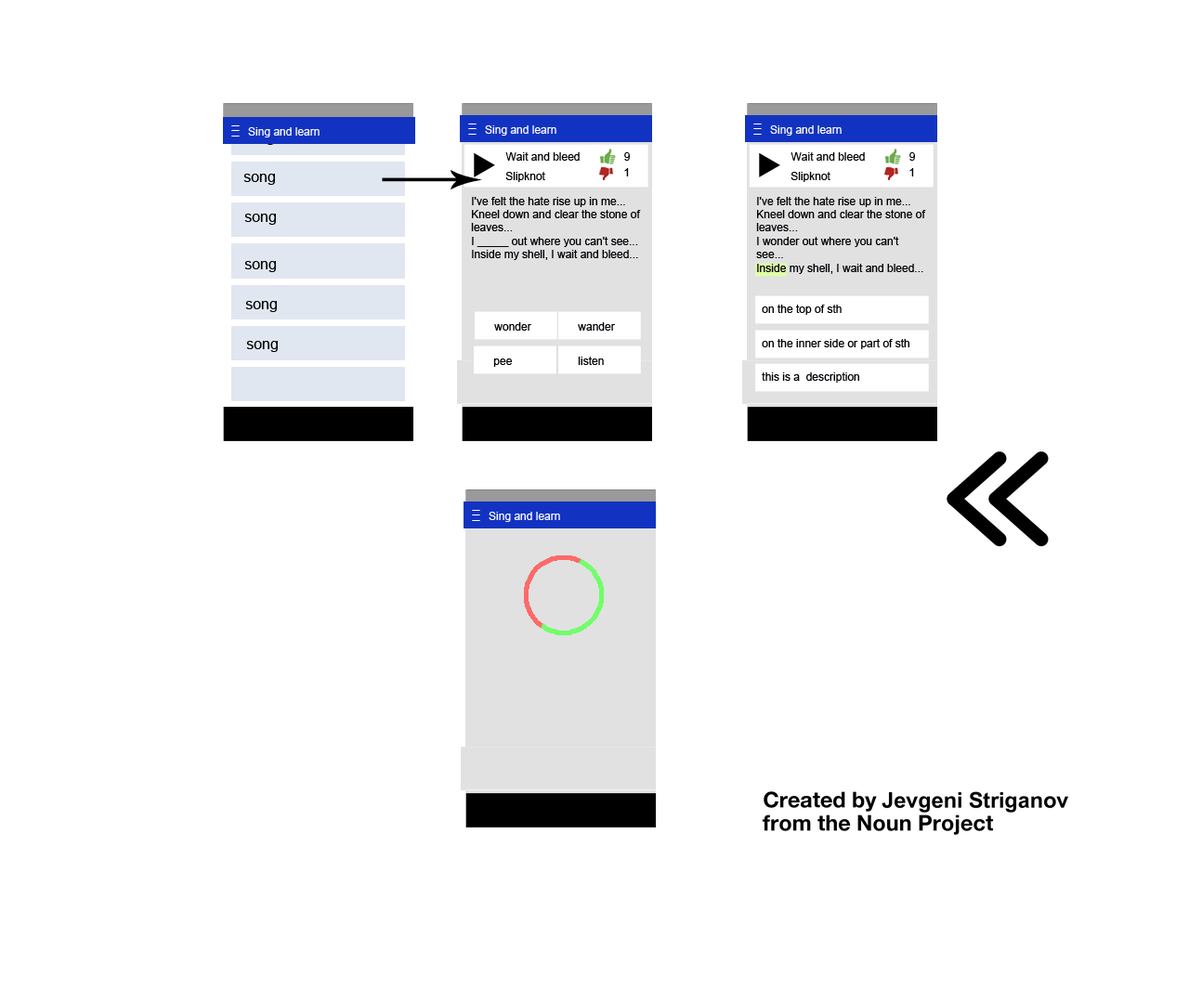
<style>
.page{position:relative;width:1189px;height:1003px;background:#ffffff}
.page>*{position:absolute;margin:0}
.t1{font:11.1px "ArialMT";color:#ffffff}
.t2{font:11.1px "ArialMT";color:#000106}
.t3{font:14.9px "ArialMT";color:#000000}
.t4{font:11.1px "ArialMT";color:#000000}
</style>
<div class="page">
<p class="t1" style="left:485px;top:125px;width:71px;height:11px">Sing and learn</p>
<p class="t1" style="left:770px;top:125px;width:71px;height:11px">Sing and learn</p>
<p class="t1" style="left:248px;top:127px;width:71px;height:10px">Sing and learn</p>
<p class="t2" style="left:505px;top:152px;width:75px;height:9px">Wait and bleed</p>
<p class="t2" style="left:624px;top:152px;width:6px;height:9px">9</p>
<p class="t2" style="left:790px;top:152px;width:75px;height:9px">Wait and bleed</p>
<p class="t2" style="left:909px;top:152px;width:6px;height:9px">9</p>
<p class="t3" style="left:243px;top:174px;width:32px;height:11px">song</p>
<p class="t4" style="left:505px;top:172px;width:40px;height:10px">Slipknot</p>
<p class="t2" style="left:624px;top:168px;width:5px;height:8px">1</p>
<p class="t4" style="left:790px;top:172px;width:40px;height:10px">Slipknot</p>
<p class="t2" style="left:909px;top:168px;width:5px;height:8px">1</p>
<p class="t2" style="left:471px;top:197px;width:170px;height:63px">I've felt the hate rise up in me...<br>Kneel down and clear the stone of leaves...<br>I _____ out where you can't see...<br>Inside my shell, I wait and bleed...</p>
<p class="t2" style="left:756px;top:197px;width:170px;height:77px">I've felt the hate rise up in me...<br>Kneel down and clear the stone of leaves...<br>I wonder out where you can't see...<br>Inside my shell, I wait and bleed...</p>
<p class="t3" style="left:244px;top:214px;width:32px;height:11px">song</p>
<p class="t3" style="left:244px;top:261px;width:32px;height:11px">song</p>
<p class="t3" style="left:245px;top:301px;width:32px;height:11px">song</p>
<p class="t2" style="left:762px;top:305px;width:79px;height:10px">on the top of sth</p>
<p class="t2" style="left:494px;top:322px;width:37px;height:9px">wonder</p>
<p class="t2" style="left:578px;top:322px;width:37px;height:9px">wander</p>
<p class="t3" style="left:246px;top:341px;width:32px;height:11px">song</p>
<p class="t2" style="left:762px;top:339px;width:147px;height:10px">on the inner side or part of sth</p>
<p class="t2" style="left:493px;top:358px;width:19px;height:9px">pee</p>
<p class="t2" style="left:578px;top:357px;width:26px;height:8px">listen</p>
<p class="t2" style="left:762px;top:372px;width:97px;height:11px">this is a  description</p>
<p class="t1" style="left:489px;top:512px;width:71px;height:10px">Sing and learn</p>
</div>
